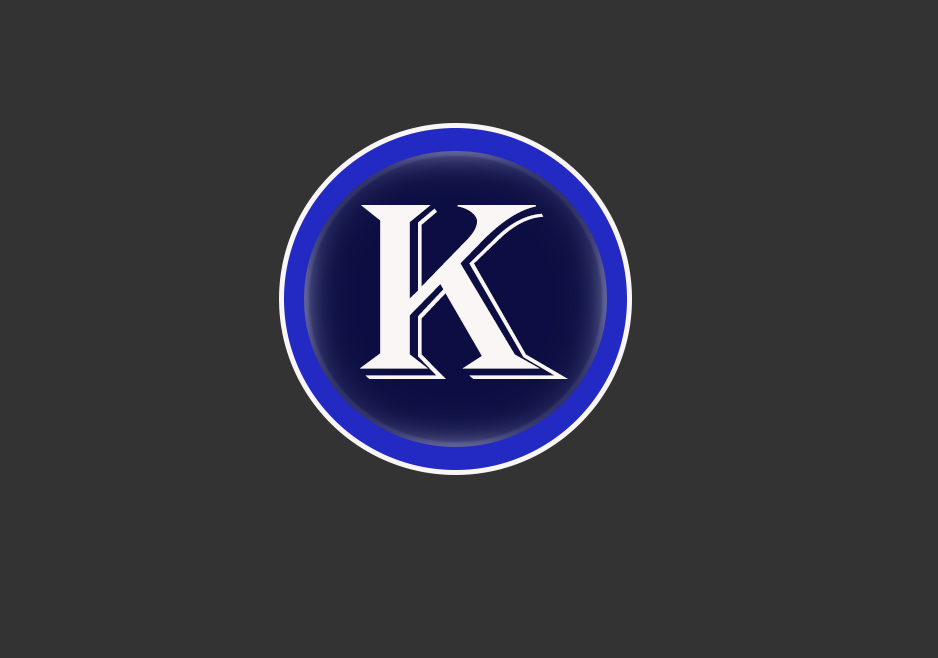
<style>
.page{position:relative;width:938px;height:658px;background:#333333}
.page>*{position:absolute;margin:0}
.t1{font:261px "Algerian";color:#faf6f6;scale:1.16 1}
</style>
<div class="page">
<p class="t1" style="left:360px;top:205px;width:208px;height:174px">K</p>
</div>
